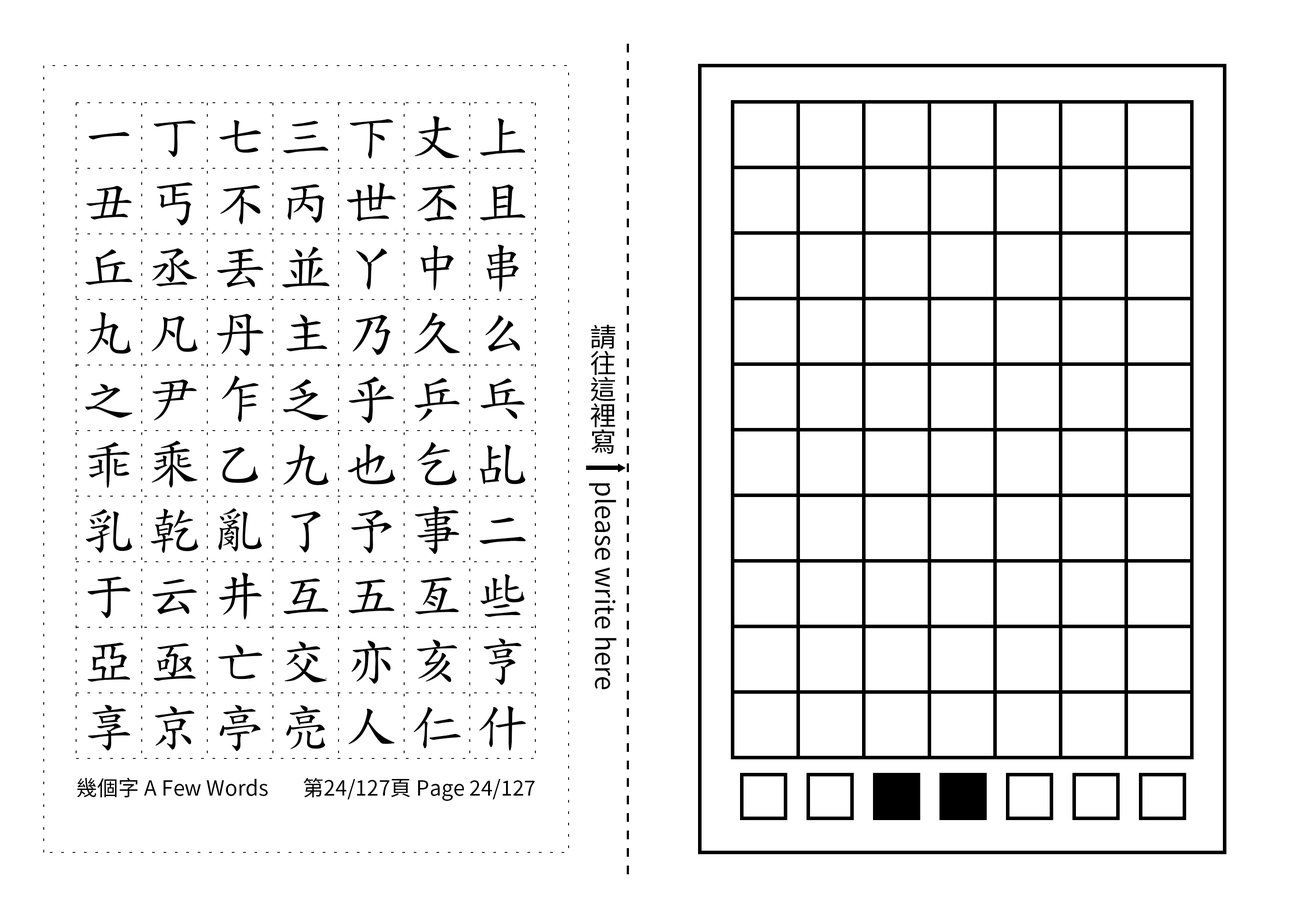
<style>
.page{position:relative;width:1299px;height:918px;background:#ffffff}
.page>*{position:absolute;margin:0}
.t1{font:52.5px/65.6px "TW-Kai-98_1";letter-spacing:0.25em;color:#000000}
.t2{font:26.2px "SourceHanSansTC-Regular";color:#000000}
.t3{font:21px "SourceHanSansTC-Regular";color:#000000}
</style>
<div class="page">
<p class="t1" style="left:85px;top:116px;width:441px;height:636px;text-align:center">一丁七三下丈上丑丐不丙世丕且丘丞丟並丫中串丸凡丹主乃久么之尹乍乏乎乒乓乖乘乙九也乞乩乳乾亂了予事二于云井互五亙些亞亟亡交亦亥亨享京亭亮人仁什</p>
<p class="t2" style="left:589px;top:324px;width:28px;height:366px;text-align:center">請往這裡寫　please write here</p>
<p class="t3" style="left:77px;top:778px;width:191px;height:20px">幾個字 A Few Words</p>
<p class="t3" style="left:303px;top:778px;width:232px;height:23px">第24/127頁 Page 24/127</p>
</div>
